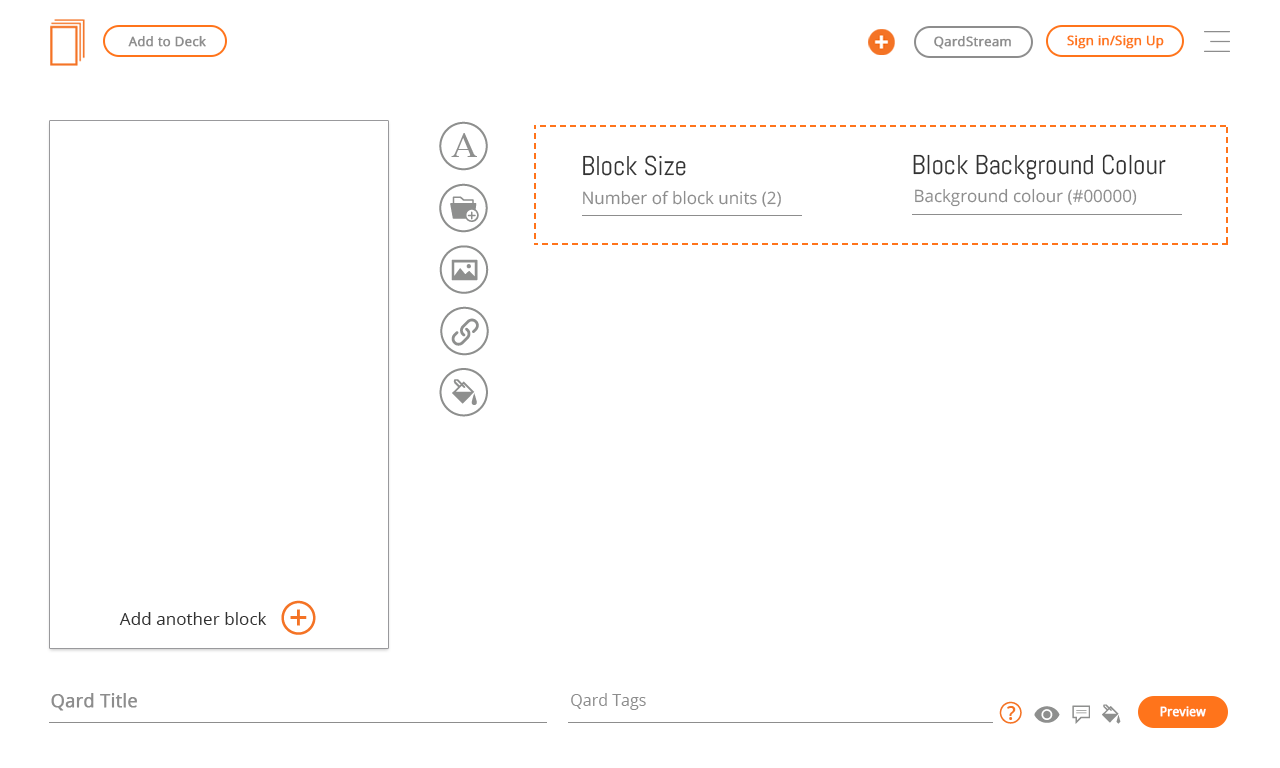
<style>
.page{position:relative;width:1280px;height:768px;background:#ffffff}
.page>*{position:absolute;margin:0}
.t1{font:13px "OpenSans";color:#8d8d8d;font-weight:bold}
.t2{font:13px "OpenSans";color:#ff741b;font-weight:bold}
.t3{font:27.3px "Abel-Regular";color:#323232}
.t4{font:17px "OpenSans";color:#8d8d8d}
.t5{font:17.1px "OpenSans";color:#323232}
.t6{font:18px "OpenSans";color:#8d8d8d;font-weight:bold}
.t7{font:16px "OpenSans";color:#8d8d8d}
.t8{font:13px "OpenSans";color:#ffffff;font-weight:bold;scale:0.93 1}
</style>
<div class="page">
<p class="t1" style="left:128px;top:35px;width:78px;height:12px">Add to Deck</p>
<p class="t1" style="left:934px;top:35px;width:77px;height:14px">QardStream</p>
<p class="t2" style="left:1067px;top:35px;width:97px;height:14px">Sign in/Sign Up</p>
<p class="t3" style="left:583px;top:155px;width:103px;height:21px">Block Size</p>
<p class="t3" style="left:913px;top:154px;width:253px;height:26px">Block Background Colour</p>
<p class="t4" style="left:583px;top:190px;width:198px;height:17px">Number of block units (2)</p>
<p class="t4" style="left:915px;top:188px;width:222px;height:19px">Background colour (#00000)</p>
<p class="t5" style="left:119px;top:612px;width:148px;height:13px">Add another block</p>
<p class="t6" style="left:51px;top:693px;width:86px;height:18px">Qard Title</p>
<p class="t7" style="left:571px;top:693px;width:75px;height:17px">Qard Tags</p>
<p class="t8" style="left:1160px;top:706px;width:46px;height:11px">Preview</p>
</div>
